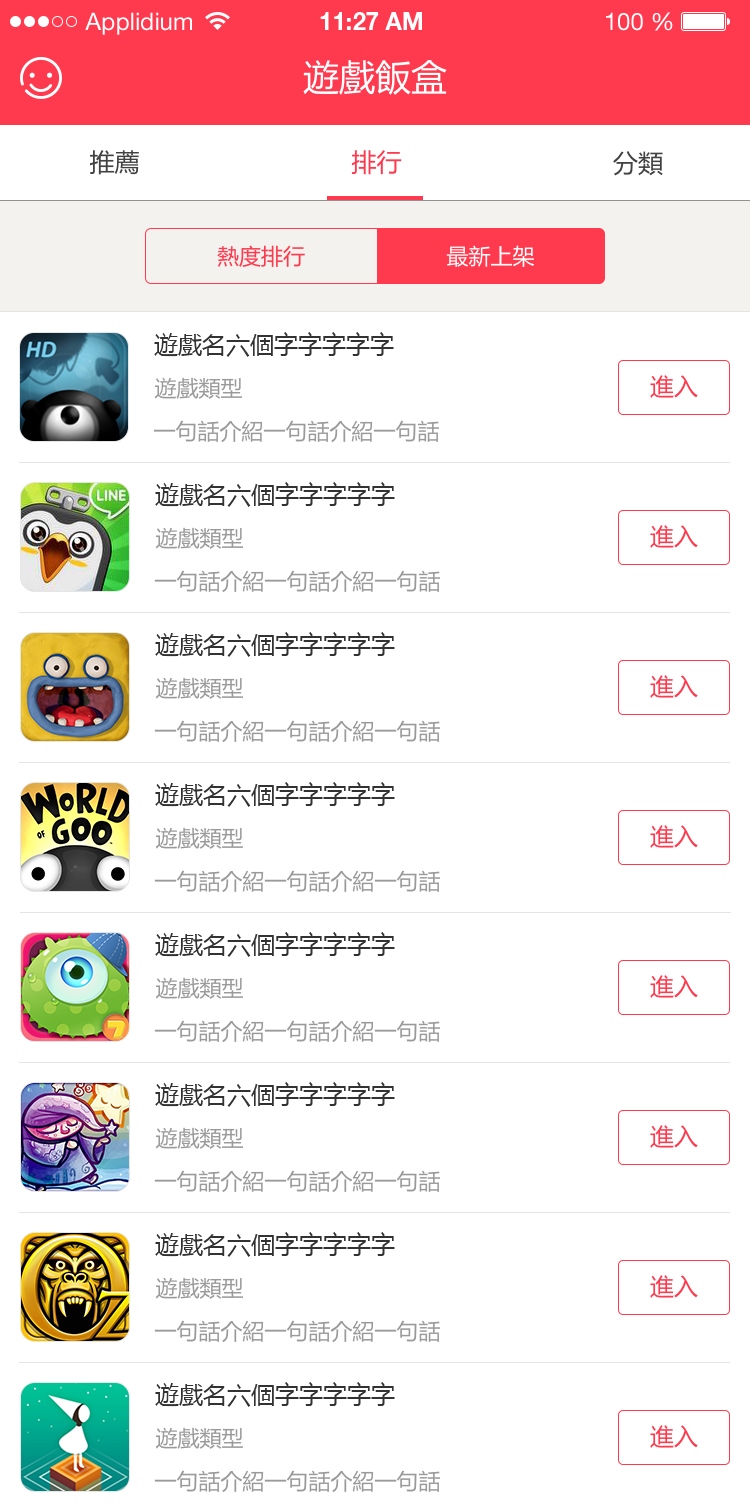
<style>
.page{position:relative;width:750px;height:1512px;background:#ffffff}
.page>*{position:absolute;margin:0}
.t1{font:24px "HelveticaNeueLTStd-Roman";color:#ffffff}
.t2{font:24px "HelveticaNeueLTStd-Bd";color:#ffffff}
.t3{font:36px "MicrosoftYaHei";color:#ffffff}
.t4{font:25px "MicrosoftYaHei";color:#424242}
.t5{font:25px "MicrosoftYaHei";color:#ff3a4e}
.t6{font:22px "MicrosoftYaHei";color:#ff3a4e}
.t7{font:22px "MicrosoftYaHei";color:#ffffff}
.t8{font:24px "MicrosoftYaHei";color:#323232}
.t9{font:22px "MicrosoftYaHei";color:#9a9a9a}
.t10{font:24px "MicrosoftYaHei";color:#ff3a4e}
</style>
<div class="page">
<p class="t1" style="left:85px;top:12px;width:107px;height:23px">Applidium</p>
<p class="t2" style="left:320px;top:12px;width:102px;height:18px">11:27 AM</p>
<p class="t1" style="left:606px;top:12px;width:67px;height:19px">100 %</p>
<p class="t3" style="left:303px;top:60px;width:144px;height:35px">遊戲飯盒</p>
<p class="t4" style="left:89px;top:150px;width:50px;height:25px">推薦</p>
<p class="t5" style="left:351px;top:150px;width:51px;height:25px">排行</p>
<p class="t4" style="left:613px;top:151px;width:50px;height:25px">分類</p>
<p class="t6" style="left:217px;top:245px;width:88px;height:22px">熱度排行</p>
<p class="t7" style="left:446px;top:245px;width:88px;height:22px">最新上架</p>
<p class="t8" style="left:154px;top:332px;width:240px;height:25px">遊戲名六個字字字字字</p>
<p class="t9" style="left:154px;top:377px;width:88px;height:22px">遊戲類型</p>
<p class="t10" style="left:650px;top:375px;width:48px;height:23px">進入</p>
<p class="t9" style="left:153px;top:420px;width:286px;height:23px">一句話介紹一句話介紹一句話</p>
<p class="t8" style="left:155px;top:482px;width:240px;height:25px">遊戲名六個字字字字字</p>
<p class="t9" style="left:155px;top:527px;width:88px;height:22px">遊戲類型</p>
<p class="t10" style="left:650px;top:525px;width:48px;height:23px">進入</p>
<p class="t9" style="left:154px;top:570px;width:286px;height:23px">一句話介紹一句話介紹一句話</p>
<p class="t8" style="left:155px;top:632px;width:240px;height:25px">遊戲名六個字字字字字</p>
<p class="t9" style="left:155px;top:677px;width:88px;height:22px">遊戲類型</p>
<p class="t10" style="left:650px;top:675px;width:48px;height:23px">進入</p>
<p class="t9" style="left:154px;top:720px;width:286px;height:23px">一句話介紹一句話介紹一句話</p>
<p class="t8" style="left:155px;top:782px;width:240px;height:25px">遊戲名六個字字字字字</p>
<p class="t9" style="left:155px;top:827px;width:88px;height:22px">遊戲類型</p>
<p class="t10" style="left:650px;top:825px;width:48px;height:23px">進入</p>
<p class="t9" style="left:154px;top:870px;width:286px;height:23px">一句話介紹一句話介紹一句話</p>
<p class="t8" style="left:155px;top:932px;width:240px;height:25px">遊戲名六個字字字字字</p>
<p class="t9" style="left:155px;top:977px;width:88px;height:22px">遊戲類型</p>
<p class="t10" style="left:650px;top:975px;width:48px;height:23px">進入</p>
<p class="t9" style="left:154px;top:1020px;width:286px;height:23px">一句話介紹一句話介紹一句話</p>
<p class="t8" style="left:155px;top:1082px;width:240px;height:25px">遊戲名六個字字字字字</p>
<p class="t9" style="left:155px;top:1127px;width:88px;height:22px">遊戲類型</p>
<p class="t10" style="left:650px;top:1125px;width:48px;height:23px">進入</p>
<p class="t9" style="left:154px;top:1170px;width:286px;height:23px">一句話介紹一句話介紹一句話</p>
<p class="t8" style="left:155px;top:1232px;width:240px;height:25px">遊戲名六個字字字字字</p>
<p class="t9" style="left:155px;top:1277px;width:88px;height:22px">遊戲類型</p>
<p class="t10" style="left:650px;top:1275px;width:48px;height:23px">進入</p>
<p class="t9" style="left:154px;top:1320px;width:286px;height:23px">一句話介紹一句話介紹一句話</p>
<p class="t8" style="left:155px;top:1382px;width:240px;height:25px">遊戲名六個字字字字字</p>
<p class="t9" style="left:155px;top:1427px;width:88px;height:22px">遊戲類型</p>
<p class="t10" style="left:650px;top:1425px;width:48px;height:23px">進入</p>
<p class="t9" style="left:154px;top:1470px;width:286px;height:23px">一句話介紹一句話介紹一句話</p>
</div>
